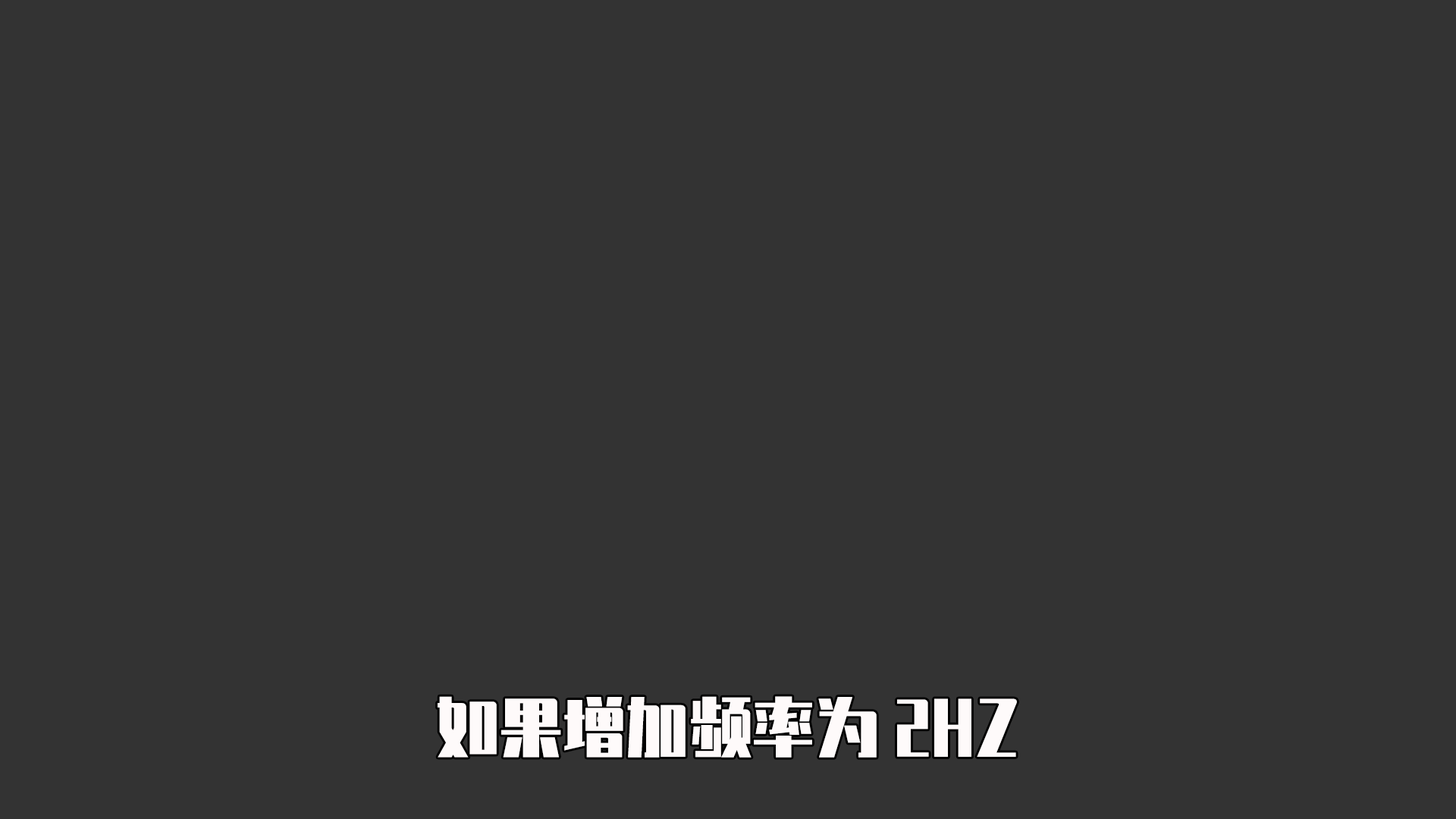
<style>
.page{position:relative;width:1456px;height:819px;background:#333333}
.page>*{position:absolute;margin:0}
.t1{font:63.2px "ZhenyanGB-Regular";color:#fefafa}
</style>
<div class="page">
<p class="t1" style="left:438px;top:696px;width:579px;height:62px">如果增加频率为2HZ</p>
</div>
